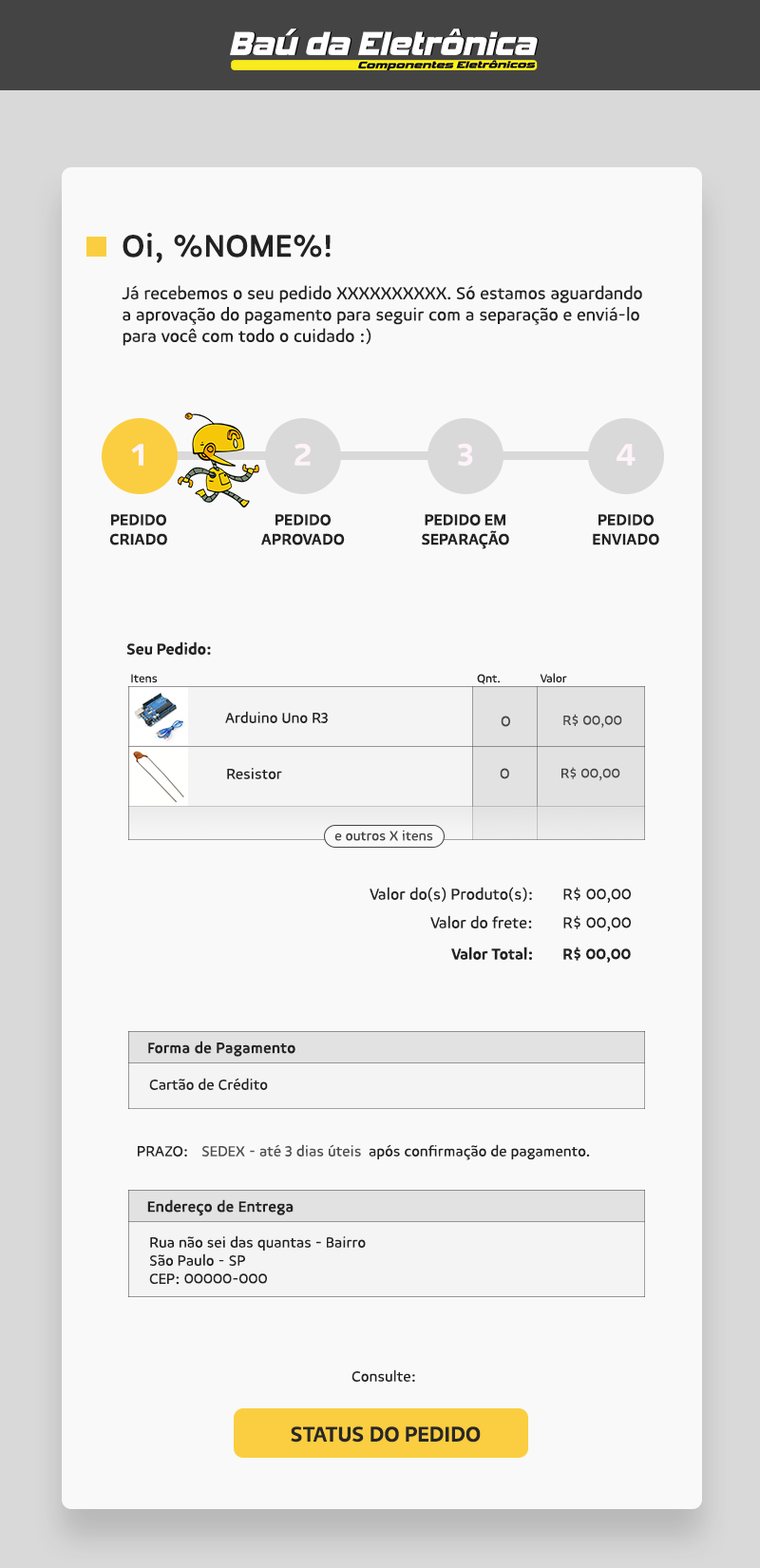
<style>
.page{position:relative;width:760px;height:1568px;background:#f9f9f9}
.page>*{position:absolute;margin:0}
.t1{font:31.7px "Niva-Book";color:#232222;font-weight:bold}
.t2{font:17.8px "Niva-Book";color:#232222}
.t3{font:32.4px "Niva-Medium";color:#fef3f9}
.t4{font:16.2px "Niva-Medium";color:#232222}
.t5{font:12.1px "Niva-Book";color:#232222}
.t6{font:15.1px "Niva-Book";color:#232222}
.t7{font:14px "Niva-Book";color:#454444}
.t8{font:15.8px "Niva-Book";color:#454444}
.t9{font:16.2px "Niva-Book";color:#232222}
.t10{font:15.2px "Niva-Book";color:#232222;font-weight:bold}
.t11{font:15.1px "Niva-Book";color:#4f4d4d}
.t12{font:22.2px "Niva-Medium";color:#292728}
</style>
<div class="page">
<p class="t1" style="left:123px;top:233px;width:208px;height:30px">Oi, %NOME%!</p>
<p class="t2" style="left:122px;top:285px;width:520px;height:61px;text-align:right">Já recebemos o seu pedido XXXXXXXXXX. Só estamos aguardando a aprovação do pagamento para seguir com a separação e enviá-lo para você com todo o cuidado :)</p>
<p class="t3" style="left:131px;top:444px;width:12px;height:22px">1</p>
<p class="t3" style="left:295px;top:444px;width:16px;height:22px">2</p>
<p class="t3" style="left:458px;top:443px;width:15px;height:24px">3</p>
<p class="t3" style="left:617px;top:444px;width:19px;height:22px">4</p>
<p class="t4" style="left:110px;top:514px;width:57px;height:31px;text-align:center">PEDIDO CRIADO</p>
<p class="t4" style="left:261px;top:514px;width:84px;height:31px;text-align:center">PEDIDO APROVADO</p>
<p class="t4" style="left:422px;top:514px;width:87px;height:35px;text-align:center">PEDIDO EM SEPARAÇÃO</p>
<p class="t4" style="left:593px;top:514px;width:67px;height:31px;text-align:center">PEDIDO ENVIADO</p>
<p class="t4" style="left:126px;top:641px;width:85px;height:14px">Seu Pedido:</p>
<p class="t5" style="left:131px;top:674px;width:27px;height:9px">Itens</p>
<p class="t5" style="left:477px;top:674px;width:23px;height:10px">Qnt.</p>
<p class="t5" style="left:540px;top:673px;width:27px;height:10px">Valor</p>
<p class="t6" style="left:225px;top:711px;width:103px;height:12px">Arduino Uno R3</p>
<p class="t7" style="left:564px;top:714px;width:58px;height:14px">R$ 00,00</p>
<p class="t8" style="left:501px;top:716px;width:9px;height:11px">0</p>
<p class="t6" style="left:227px;top:768px;width:55px;height:11px">Resistor</p>
<p class="t8" style="left:500px;top:768px;width:9px;height:11px">0</p>
<p class="t7" style="left:562px;top:767px;width:59px;height:14px">R$ 00,00</p>
<p class="t7" style="left:335px;top:830px;width:98px;height:11px">e outros X itens</p>
<p class="t9" style="left:370px;top:887px;width:162px;height:15px">Valor do(s) Produto(s):</p>
<p class="t9" style="left:564px;top:887px;width:67px;height:16px">R$ 00,00</p>
<p class="t9" style="left:430px;top:915px;width:102px;height:13px">Valor do frete:</p>
<p class="t9" style="left:564px;top:915px;width:67px;height:16px">R$ 00,00</p>
<p class="t4" style="left:451px;top:947px;width:81px;height:13px">Valor Total:</p>
<p class="t4" style="left:564px;top:947px;width:67px;height:16px">R$ 00,00</p>
<p class="t10" style="left:148px;top:1041px;width:148px;height:16px">Forma de Pagamento</p>
<p class="t6" style="left:149px;top:1078px;width:119px;height:12px">Cartão de Crédito</p>
<p class="t11" style="left:201px;top:1144px;width:160px;height:13px">SEDEX - até 3 dias úteis</p>
<p class="t6" style="left:369px;top:1144px;width:221px;height:16px">após confirmação de pagamento.</p>
<p class="t6" style="left:138px;top:1146px;width:49px;height:11px">PRAZO:</p>
<p class="t10" style="left:147px;top:1199px;width:147px;height:17px">Endereço de Entrega</p>
<p class="t6" style="left:149px;top:1235px;width:217px;height:50px;text-align:right">Rua não sei das quantas - Bairro<br>São Paulo - SP<br>CEP: 00000-000</p>
<p class="t6" style="left:352px;top:1369px;width:63px;height:13px">Consulte:</p>
<p class="t12" style="left:291px;top:1426px;width:190px;height:17px">STATUS DO PEDIDO</p>
</div>
